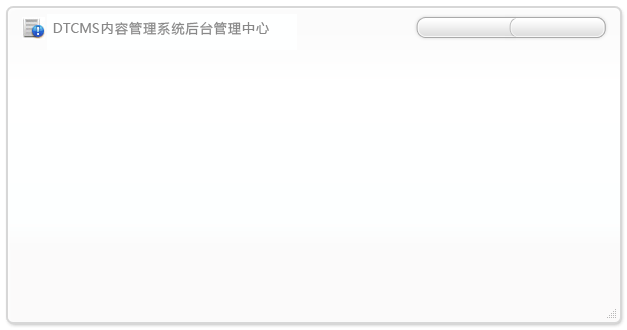
<style>
.page{position:relative;width:627px;height:330px;background:#fbfafa}
.page>*{position:absolute;margin:0}
.t1{font:13px "MicrosoftYaHei";letter-spacing:0.02em;color:#888888}
.t2{font:13px "MicrosoftYaHei";letter-spacing:0.09em;color:#888888}
</style>
<div class="page">
<p class="t1" style="left:53px;top:23px;width:46px;height:10px">DTCMS</p>
<p class="t2" style="left:101px;top:21px;width:168px;height:14px">内容管理系统后台管理中心</p>
</div>
